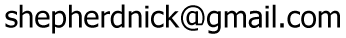
<style>
.page{position:relative;width:346px;height:38px;background:#ffffff}
.page>*{position:absolute;margin:0}
.t1{font:30px "Tahoma";color:#000000}
</style>
<div class="page">
<p class="t1" style="left:5px;top:4px;width:335px;height:30px">shepherdnick@gmail.com</p>
</div>
